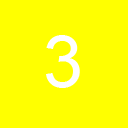
<style>
.page{position:relative;width:128px;height:128px;background:#ffff00}
.page>*{position:absolute;margin:0}
.t1{font:72px "ArialMT";color:#ffffff}
</style>
<div class="page">
<p class="t1" style="left:46px;top:35px;width:34px;height:53px">3</p>
</div>
